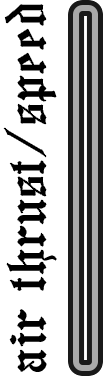
<style>
.page{position:relative;width:103px;height:376px;background:#ffffff}
.page>*{position:absolute;margin:0}
.t1{font:51.2px "Baxter";color:#000000}
</style>
<div class="page">
<p class="t1" style="left:4px;top:5px;width:52px;height:366px;rotate:-90deg">air thrust/speed</p>
</div>
